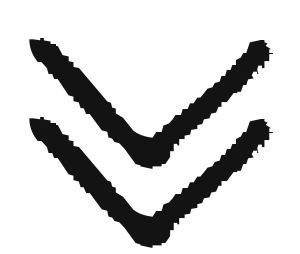
<style>
.page{position:relative;width:300px;height:254px;background:#ffffff}
.page>*{position:absolute;margin:0}
.t1{font:345.3px "Hosofuwafont";color:#131313;scale:1.79 1}
</style>
<div class="page">
<p class="t1" style="left:29px;top:38px;width:244px;height:131px">v</p>
<p class="t1" style="left:29px;top:117px;width:244px;height:131px">v</p>
</div>
